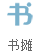
<style>
.page{position:relative;width:40px;height:55px;background:#ffffff}
.page>*{position:absolute;margin:0}
.t1{font:21.2px "SimSun";letter-spacing:0.075em;color:#666666;font-variant:small-caps}
</style>
<div class="page">
<p class="t1" style="left:8px;top:39px;width:24px;height:12px">书摊</p>
</div>
